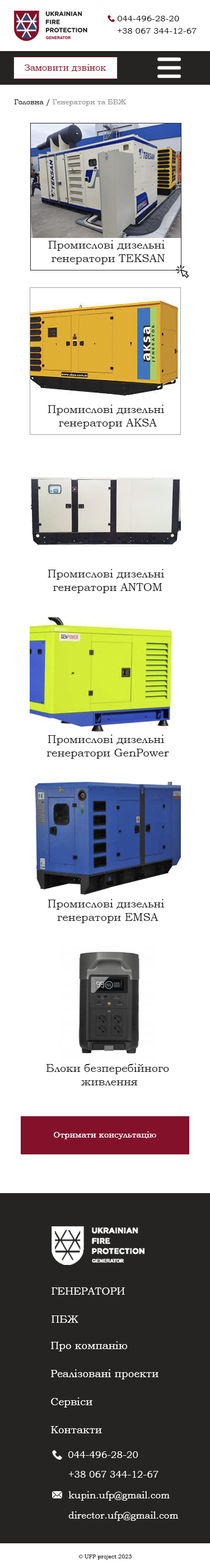
<style>
.page{position:relative;width:210px;height:1568px;background:#ffffff}
.page>*{position:absolute;margin:0}
.t1{font:8.4px/12.3px "BookmanOldStyle";color:#252423}
.t2{font:9px "BookmanOldStyle";color:#831129}
.t3{font:7.3px "BookmanOldStyle";color:#949494}
.t4{font:7.3px "BookmanOldStyle";color:#252423}
.t5{font:11.2px "BookmanOldStyle";color:#252423}
.t6{font:11.2px "BookmanOldStyle";color:#252423;text-transform:uppercase}
.t7{font:8.4px "BookmanOldStyle";color:#ffffff}
.t8{font:10.7px/28.1px "BookmanOldStyle";color:#fefefe;text-transform:uppercase}
.t9{font:10.7px/28.1px "BookmanOldStyle";color:#fefefe}
.t10{font:10.7px/28.1px "BookmanOldStyle";color:#ffffff}
.t11{font:9.5px "BookmanOldStyle";color:#ffffff}
.t12{font:9.5px/20.2px "BookmanOldStyle";color:#ffffff}
.t13{font:5.6px "BookmanOldStyle";color:#252423}
</style>
<div class="page">
<p class="t1" style="left:117px;top:16px;width:80px;height:18px">044-496-28-20<br>+38 067 344-12-67</p>
<p class="t2" style="left:25px;top:64px;width:82px;height:8px">Замовити дзвінок</p>
<p class="t3" style="left:14px;top:99px;width:112px;height:7px"><span class="t4">Головна / </span>Генератори та ББЖ</p>
<p class="t5" style="left:48px;top:240px;width:118px;height:24px;text-align:center">Промислові дизельні <br>генератори TEKSAN</p>
<p class="t5" style="left:48px;top:405px;width:117px;height:24px;text-align:center">Промислові дизельні <br>генератори AKSA</p>
<p class="t5" style="left:48px;top:569px;width:117px;height:24px;text-align:center">Промислові дизельні <br>генератори <span class="t6">Antom</span></p>
<p class="t5" style="left:47px;top:735px;width:122px;height:24px;text-align:center">Промислові дизельні <br>генератори GenPower</p>
<p class="t5" style="left:48px;top:899px;width:117px;height:24px;text-align:center">Промислові дизельні <br>генератори EMSA</p>
<p class="t5" style="left:46px;top:1063px;width:123px;height:22px;text-align:center">Блоки безперебійного<br> живлення</p>
<p class="t7" style="left:54px;top:1131px;width:103px;height:8px">Отримати консультацію</p>
<p class="t8" style="left:52px;top:1287px;width:73px;height:36px">Генератори<br><span class="t9">ПБЖ</span></p>
<p class="t10" style="left:51px;top:1341px;width:108px;height:92px">Про компанію<br>Реалізовані проекти<br>Сервіси<br>Контакти</p>
<p class="t11" style="left:68px;top:1451px;width:71px;height:7px">044-496-28-20</p>
<p class="t11" style="left:69px;top:1471px;width:90px;height:7px">+38 067 344-12-67</p>
<p class="t12" style="left:68px;top:1491px;width:111px;height:30px">kupin.ufp@gmail.com<br>director.ufp@gmail.com</p>
<p class="t13" style="left:79px;top:1555px;width:53px;height:5px">© UFP project 2023</p>
</div>
